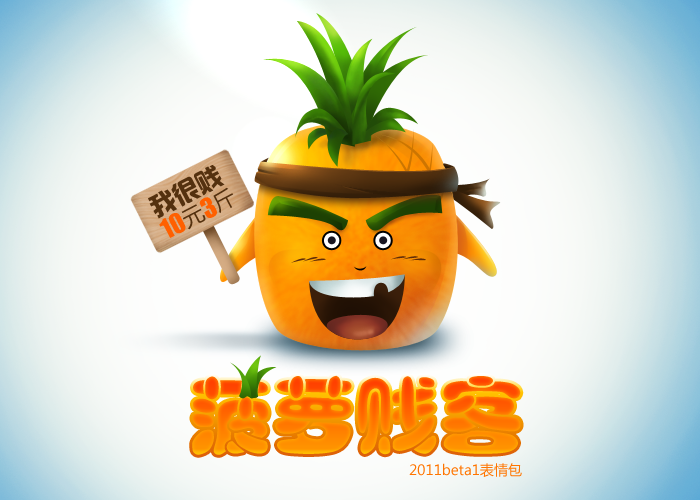
<style>
.page{position:relative;width:700px;height:500px}
.page>*{position:absolute;margin:0}
.t1{font:25.7px "hzgb";color:#54310f}
.t2{font:25.7px "Impact";color:#ff6000}
.t3{font:21.4px "MicrosoftYaHei";color:#54310f}
.t4{font:83.8px "HYm2gj"}
.t5{font:14px "MicrosoftYaHei";color:#ff7500}
</style>
<div class="page">
<p class="t1" style="left:148px;top:165px;width:77px;height:54px;rotate:-27deg">我很贱</p>
<p class="t2" style="left:159px;top:187px;width:74px;height:51px;rotate:-27deg">10<span class="t3">元</span>3<span class="t3">斤</span></p>
<p class="t4" style="left:192px;top:375px;width:329px;height:80px">菠萝贱客</p>
<p class="t5" style="left:409px;top:463px;width:113px;height:14px">2011beta1表情包</p>
</div>
